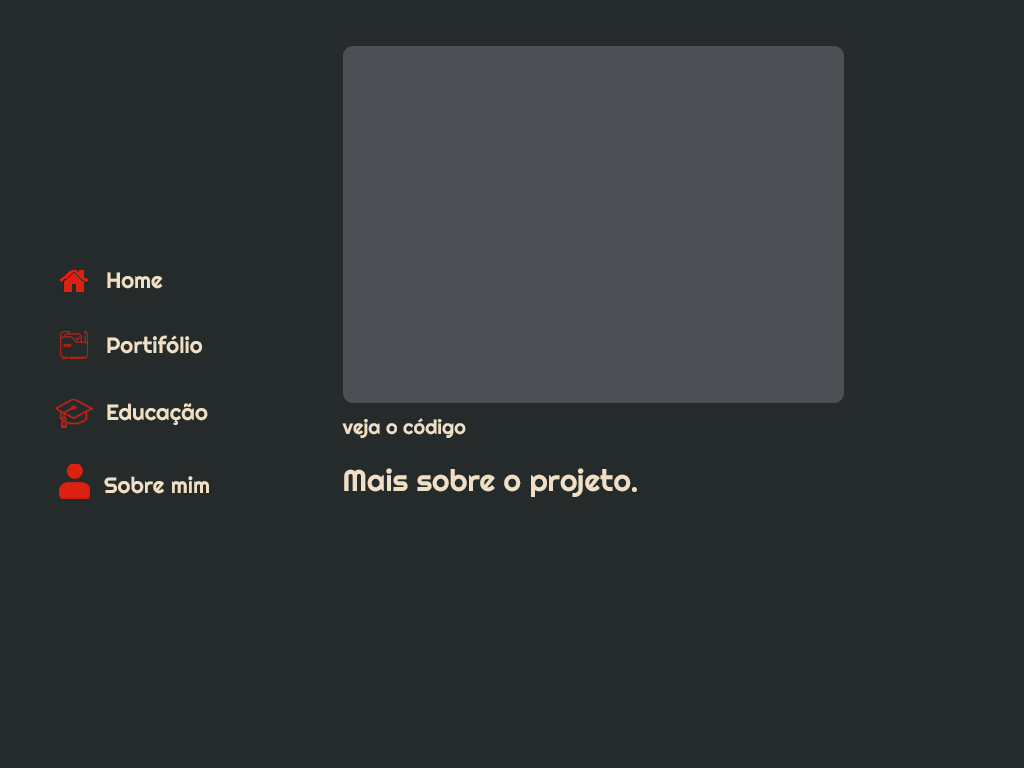
<style>
.page{position:relative;width:1024px;height:768px;background:#252b2b}
.page>*{position:absolute;margin:0}
.t1{font:22.3px "Righteous-Regular";color:#efdfc5}
.t2{font:20px "Righteous-Regular";color:#efdfc5}
.t3{font:30px "Righteous-Regular";color:#efdfc5}
</style>
<div class="page">
<p class="t1" style="left:107px;top:272px;width:56px;height:17px">Home</p>
<p class="t1" style="left:107px;top:335px;width:95px;height:19px">Portifólio</p>
<p class="t1" style="left:107px;top:403px;width:101px;height:22px">Educação</p>
<p class="t2" style="left:342px;top:418px;width:124px;height:20px">veja o código</p>
<p class="t3" style="left:344px;top:468px;width:293px;height:29px">Mais sobre o projeto.</p>
<p class="t1" style="left:104px;top:476px;width:105px;height:18px">Sobre mim</p>
</div>
